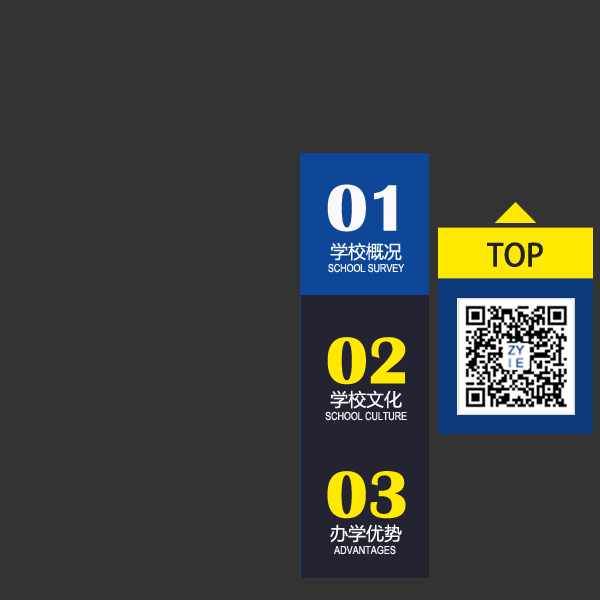
<style>
.page{position:relative;width:600px;height:600px;background:#333333}
.page>*{position:absolute;margin:0}
.t1{font:67.9px "BritannicBold";color:#f9f9f9}
.t2{font:18px "MicrosoftYaHei";color:#f8fbfd}
.t3{font:30.9px "AdobeHeitiStd-Regular";color:#222222;text-transform:uppercase}
.t4{font:11.1px "ArialNarrow";letter-spacing:-0.01em;color:#f8fbfd}
.t5{font:68.2px "BritannicBold";color:#ffe900}
.t6{font:18.1px "MicrosoftYaHei";color:#f8fbfd}
.t7{font:11.1px "ArialNarrow";color:#f8fbfd;text-transform:uppercase}
</style>
<div class="page">
<p class="t1" style="left:327px;top:184px;width:70px;height:48px">01</p>
<p class="t2" style="left:330px;top:242px;width:72px;height:19px">学校概况</p>
<p class="t3" style="left:487px;top:242px;width:56px;height:25px">TOP</p>
<p class="t4" style="left:328px;top:263px;width:77px;height:10px">SCHOOL SURVEY</p>
<p class="t5" style="left:327px;top:337px;width:79px;height:48px">02</p>
<p class="t6" style="left:330px;top:390px;width:72px;height:19px">学校文化</p>
<p class="t4" style="left:325px;top:411px;width:82px;height:10px">SCHOOL CULTURE</p>
<p class="t5" style="left:327px;top:471px;width:79px;height:48px">03</p>
<p class="t6" style="left:330px;top:524px;width:72px;height:19px">办学优势</p>
<p class="t7" style="left:334px;top:545px;width:62px;height:10px">advantages</p>
</div>
